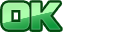
<style>
.page{position:relative;width:114px;height:32px;background:#ffffff}
.page>*{position:absolute;margin:0}
.t1{font:41.3px "DFSoGeiStd-W9";letter-spacing:-0.03em;font-weight:bold;scale:0.96 1}
</style>
<div class="page">
<p class="t1" style="left:2px;top:2px;width:59px;height:28px">OK</p>
<p class="t1" style="left:2px;top:2px;width:59px;height:28px">OK</p>
</div>
